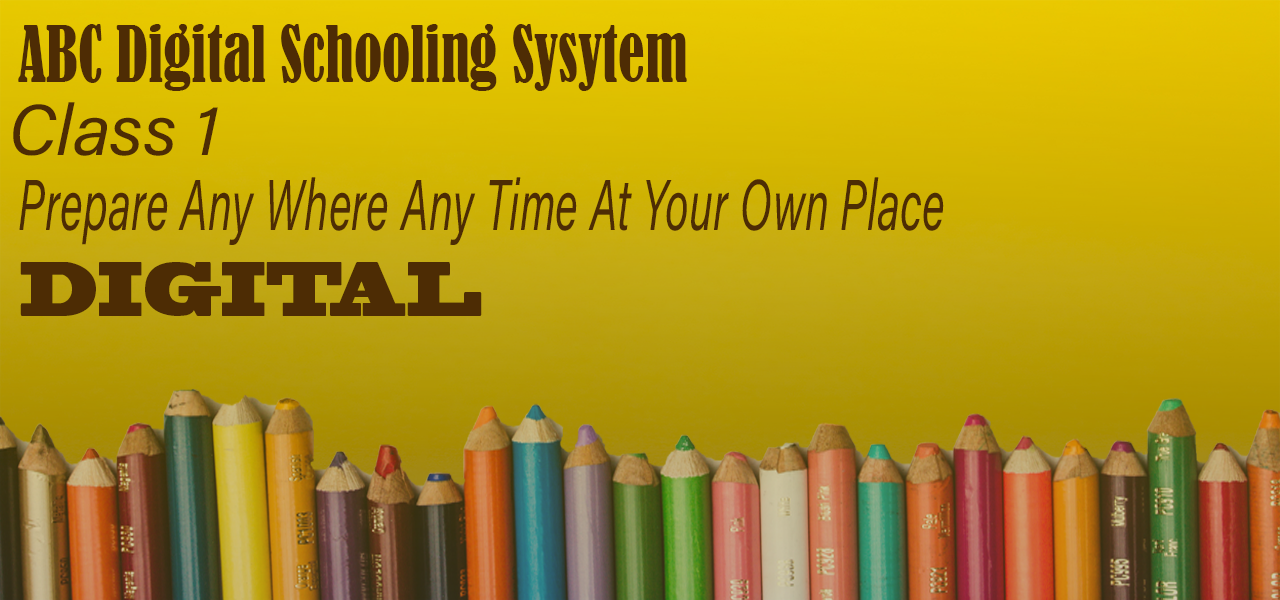
<style>
.page{position:relative;width:1280px;height:600px}
.page>*{position:absolute;margin:0}
.t1{font:72px "BernardMT-Condensed";color:#4e2c04;scale:0.82 1}
.t2{font:72px "AcuminConcept-Italic";color:#4d2c04}
.t3{font:72px "AcuminConcept-Italic";color:#4d2c04;scale:0.61 1}
.t4{font:72px "BlackoakStd";color:#4d2c04;scale:0.58 1}
</style>
<div class="page">
<p class="t1" style="left:18px;top:24px;width:669px;height:67px">ABC Digital Schooling Sysytem</p>
<p class="t2" style="left:13px;top:102px;width:205px;height:54px">Class 1</p>
<p class="t3" style="left:19px;top:177px;width:925px;height:68px">Prepare Any Where Any Time At Your Own Place</p>
<p class="t4" style="left:20px;top:262px;width:462px;height:54px">DIGITAL</p>
</div>
